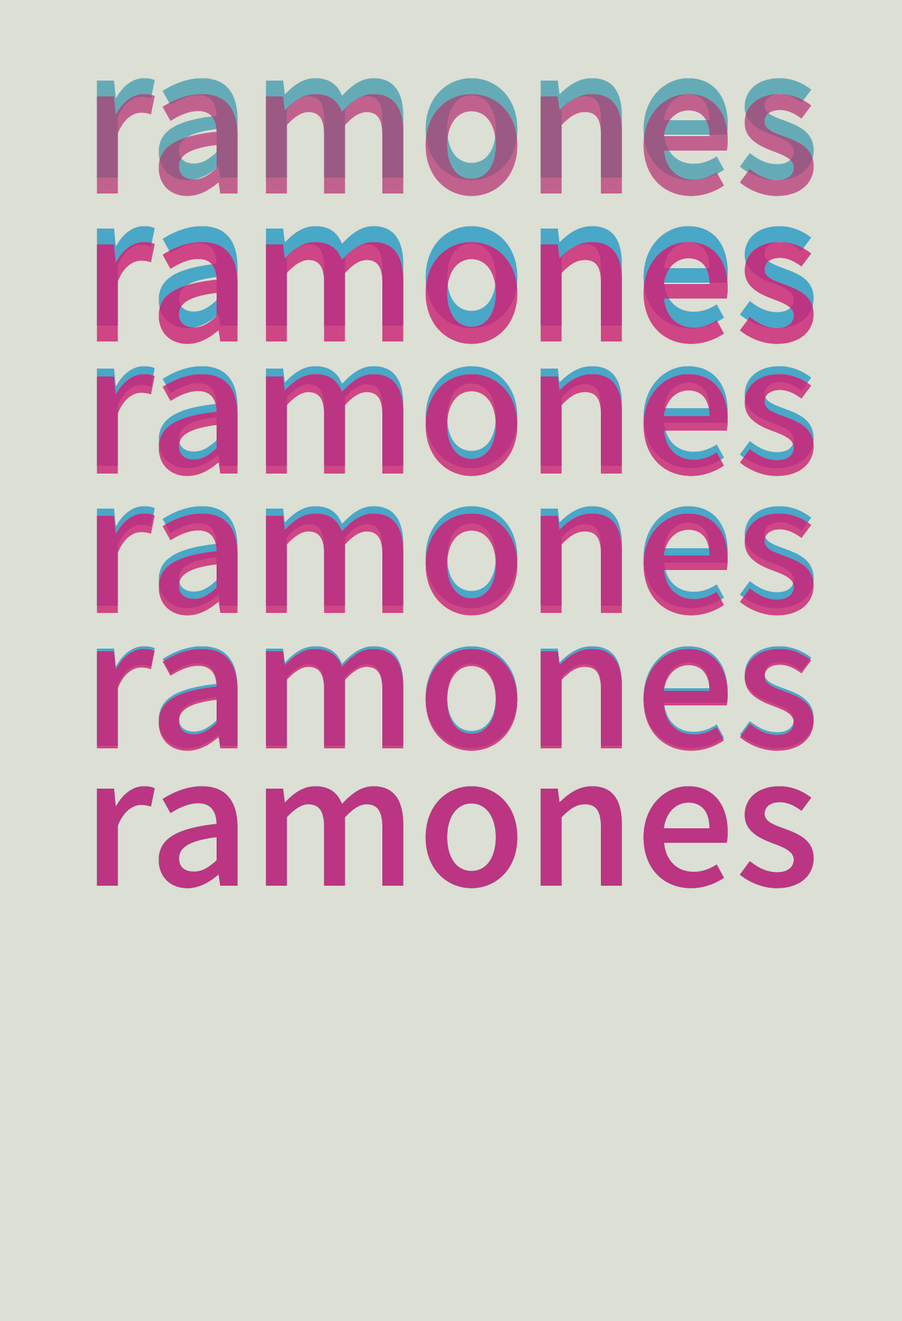
<style>
.page{position:relative;width:902px;height:1321px;background:#dcdfd3}
.page>*{position:absolute;margin:0}
.t1{font:198.2px "SourceSansRoman_539.000wght"}
.t2{font:198.2px "SourceSansRoman_539.000wght";color:#bb3582}
</style>
<div class="page">
<p class="t1" style="left:96px;top:78px;width:719px;height:102px">ramones</p>
<p class="t1" style="left:96px;top:94px;width:719px;height:102px">ramones</p>
<p class="t1" style="left:96px;top:226px;width:719px;height:102px">ramones</p>
<p class="t2" style="left:96px;top:242px;width:719px;height:102px">ramones</p>
<p class="t2" style="left:96px;top:366px;width:719px;height:102px">ramones</p>
<p class="t2" style="left:96px;top:374px;width:719px;height:102px">ramones</p>
<p class="t2" style="left:96px;top:506px;width:719px;height:102px">ramones</p>
<p class="t2" style="left:96px;top:513px;width:719px;height:103px">ramones</p>
<p class="t2" style="left:96px;top:646px;width:719px;height:103px">ramones</p>
<p class="t2" style="left:96px;top:649px;width:719px;height:102px">ramones</p>
<p class="t2" style="left:96px;top:786px;width:719px;height:103px">ramones</p>
<p class="t2" style="left:96px;top:786px;width:719px;height:103px">ramones</p>
</div>
